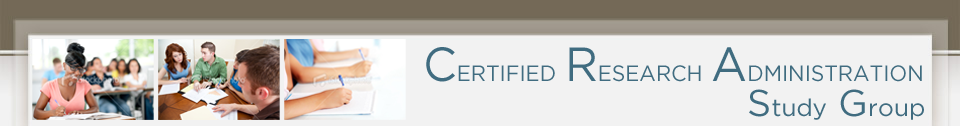
<style>
.page{position:relative;width:960px;height:126px;background:#f2f2f2}
.page>*{position:absolute;margin:0}
.t1{font:22px "Gotham-Book";color:#406c80;scale:0.95 1}
.t2{font:48px "Gotham-Book";color:#406c80;scale:0.95 1}
.t3{font:24px "Gotham-Book";color:#406c80}
.t4{font:37.2px "Gotham-Book";color:#406c80}
</style>
<div class="page">
<p class="t1" style="left:426px;top:47px;width:496px;height:35px"><span class="t2">C</span>ERTIFIED <span class="t2">R</span>ESEARCH <span class="t2">A</span>DMINISTRATION</p>
<p class="t3" style="left:749px;top:89px;width:175px;height:31px"><span class="t4">S</span>tudy<span class="t4"> G</span>roup</p>
</div>
